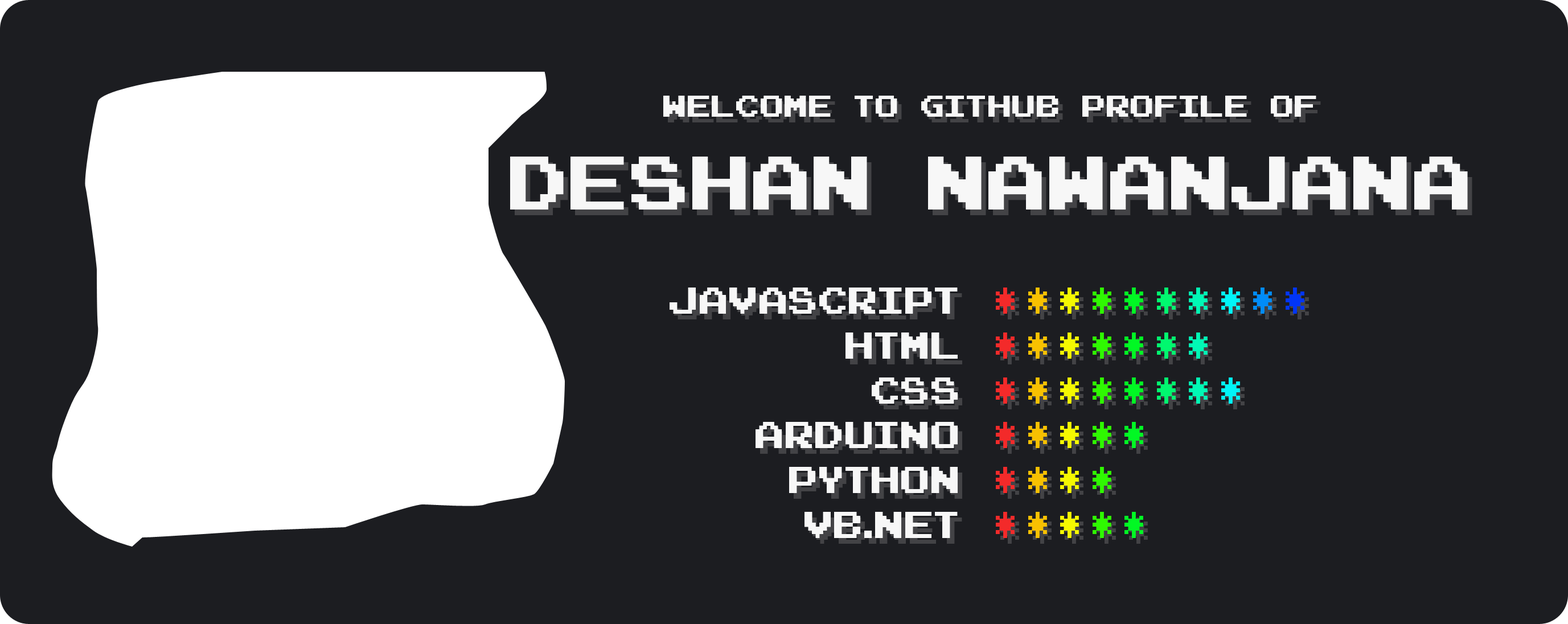
<style>
.page{position:relative;width:1568px;height:624px;background:#1c1d21}
.page>*{position:absolute;margin:0}
.t1{font:30.4px "Arcadepix";color:#fefefe;text-transform:uppercase}
.t2{font:76px "Arcadepix";color:#fefefe;text-transform:uppercase}
.t3{font:37.4px "Arcadepix";color:#fefefe;text-transform:uppercase}
.t4{font:37.4px "Arcadepix";letter-spacing:0.26em;color:#fa2a2a;text-transform:uppercase}
.t5{font:37.4px "Arcadepix";letter-spacing:0.26em;color:#ffc600;text-transform:uppercase}
.t6{font:37.4px "Arcadepix";letter-spacing:0.26em;color:#fcff00;text-transform:uppercase}
.t7{font:37.4px "Arcadepix";letter-spacing:0.26em;color:#30ff00;text-transform:uppercase}
.t8{font:37.4px "Arcadepix";letter-spacing:0.26em;color:#00ff24;text-transform:uppercase}
.t9{font:37.4px "Arcadepix";letter-spacing:0.26em;color:#00ff72;text-transform:uppercase}
.t10{font:37.4px "Arcadepix";letter-spacing:0.26em;color:#00ffba;text-transform:uppercase}
.t11{font:37.4px "Arcadepix";letter-spacing:0.26em;color:#00fcff;text-transform:uppercase}
.t12{font:37.4px "Arcadepix";letter-spacing:0.26em;color:#0090ff;text-transform:uppercase}
.t13{font:37.4px "Arcadepix";letter-spacing:0.26em;color:#0036fe;text-transform:uppercase}
</style>
<div class="page">
<p class="t1" style="left:663px;top:96px;width:653px;height:21px;opacity:0.97">welcome to github profile of</p>
<p class="t2" style="left:510px;top:157px;width:958px;height:53px;opacity:0.97">DESHAN NAWANJANA</p>
<p class="t3" style="left:670px;top:288px;width:288px;height:250px;text-align:right;opacity:0.97">Javascript<br>html<br>css<br>Arduino<br>Python<br>vb.net</p>
<p class="t4" style="left:996px;top:288px;width:308px;height:250px;opacity:0.97">*<span class="t5">*</span><span class="t6">*</span><span class="t7">*</span><span class="t8">*</span><span class="t9">*</span><span class="t10">*</span><span class="t11">*</span><span class="t12">*</span><span class="t13">*<br></span>*<span class="t5">*</span><span class="t6">*</span><span class="t7">*</span><span class="t8">*</span><span class="t9">*</span><span class="t10">*<br></span>*<span class="t5">*</span><span class="t6">*</span><span class="t7">*</span><span class="t8">*</span><span class="t9">*</span><span class="t10">*</span><span class="t11">*<br></span>*<span class="t5">*</span><span class="t6">*</span><span class="t7">*</span><span class="t8">*<br></span>*<span class="t5">*</span><span class="t6">*</span><span class="t7">*<br></span>*<span class="t5">*</span><span class="t6">*</span><span class="t7">*</span><span class="t8">*</span></p>
</div>
